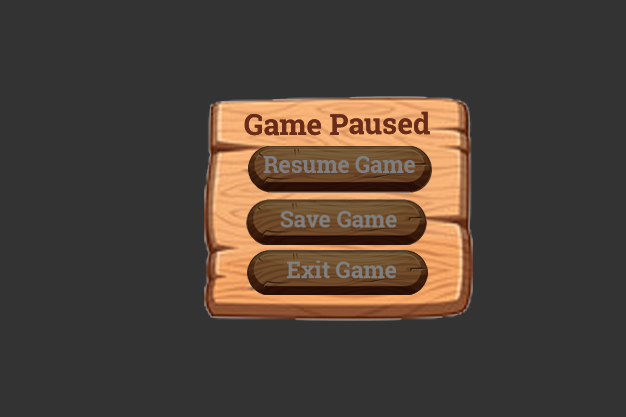
<style>
.page{position:relative;width:626px;height:417px;background:#333333}
.page>*{position:absolute;margin:0}
.t1{font:29.3px "RobotoSlab-Bold";color:#692c19}
.t2{font:22.7px "RobotoSlab-Bold";color:#7f7d7d}
.t3{font:22.7px "RobotoSlab-Bold"}
</style>
<div class="page">
<p class="t1" style="left:244px;top:111px;width:186px;height:25px">Game Paused</p>
<p class="t2" style="left:263px;top:156px;width:152px;height:17px">Resume Game Game</p>
<p class="t3" style="left:264px;top:157px;width:152px;height:17px">Resume Game Game</p>
</div>
